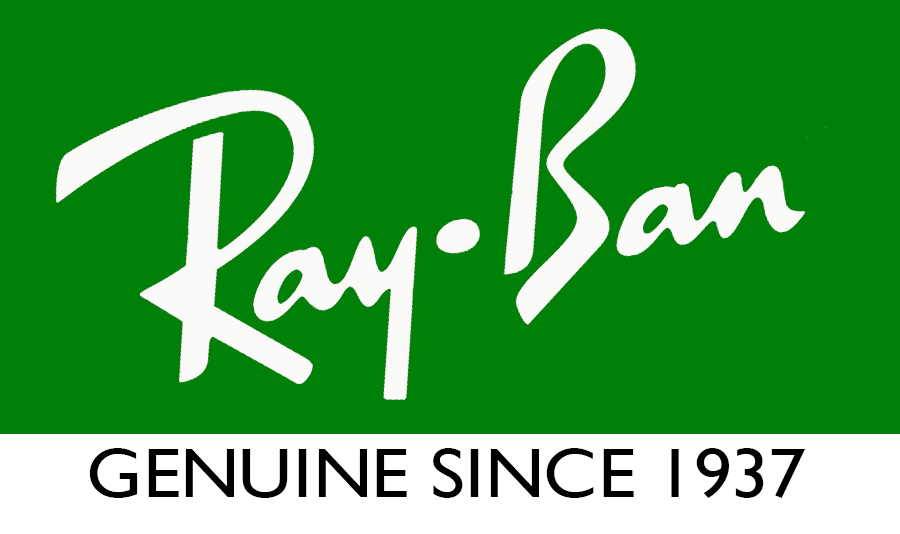
<style>
.page{position:relative;width:900px;height:534px;background:#008009}
.page>*{position:absolute;margin:0}
.t1{font:70.3px "GillSansMT";color:#000000;text-transform:uppercase;scale:1.08 1}
</style>
<div class="page">
<p class="t1" style="left:89px;top:448px;width:716px;height:50px">genuine since 1937</p>
</div>
